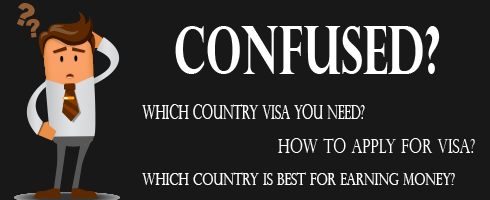
<style>
.page{position:relative;width:490px;height:200px;background:#181818}
.page>*{position:absolute;margin:0}
.t1{font:19.7px "PerpetuaTitlingMT-Light";color:#ffffff;scale:0.65 1}
.t2{font:17.2px "PerpetuaTitlingMT-Light";color:#ffffff;scale:0.75 1}
</style>
<div class="page">
<p class="t1" style="left:142px;top:104px;width:223px;height:15px">Which Country Visa You Need?</p>
<p class="t2" style="left:142px;top:172px;width:313px;height:13px">Which Country is best for earning money?</p>
</div>
